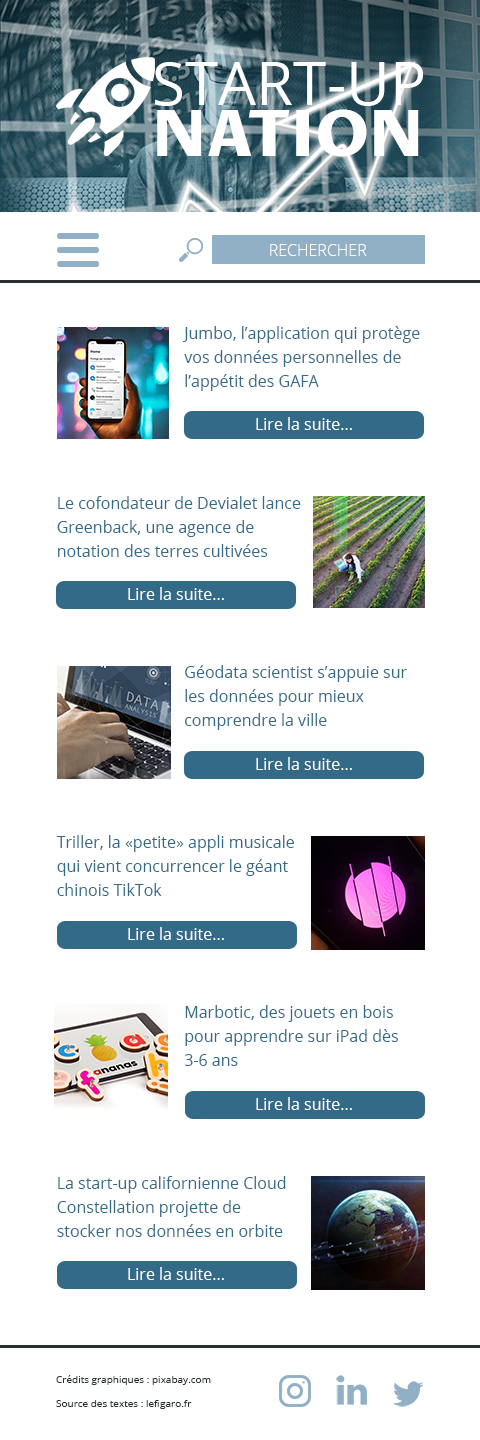
<style>
.page{position:relative;width:480px;height:1440px;background:#ffffff}
.page>*{position:absolute;margin:0}
.t1{font:60px "OpenSans-Regular";color:#ffffff}
.t2{font:64px "ProzaLibre-ExtraBold";color:#ffffff}
.t3{font:16px "OpenSans-Light";color:#ffffff}
.t4{font:16px/24px "OpenSans-Regular";color:#336a88}
.t5{font:16px "OpenSans-Regular";color:#ffffff}
.t6{font:10px/24px "OpenSans-Regular";color:#2a2f32}
</style>
<div class="page">
<p class="t1" style="left:155px;top:62px;width:268px;height:44px">START-UP</p>
<p class="t2" style="left:157px;top:109px;width:262px;height:48px">NATION</p>
<p class="t3" style="left:270px;top:244px;width:97px;height:12px">RECHERCHER</p>
<p class="t4" style="left:182px;top:326px;width:238px;height:65px">Jumbo, l’application qui protège vos données personnelles de l’appétit des GAFA</p>
<p class="t5" style="left:256px;top:417px;width:96px;height:13px">Lire la suite...</p>
<p class="t4" style="left:57px;top:496px;width:244px;height:61px">Le cofondateur de Devialet lance Greenback, une agence de notation des terres cultivées</p>
<p class="t5" style="left:128px;top:587px;width:96px;height:13px">Lire la suite...</p>
<p class="t4" style="left:185px;top:665px;width:222px;height:65px">Géodata scientist s’appuie sur les données pour mieux comprendre la ville</p>
<p class="t5" style="left:256px;top:757px;width:96px;height:13px">Lire la suite...</p>
<p class="t4" style="left:56px;top:835px;width:238px;height:61px">Triller, la «petite» appli musicale qui vient concurrencer le géant chinois TikTok</p>
<p class="t5" style="left:128px;top:927px;width:96px;height:13px">Lire la suite...</p>
<p class="t4" style="left:185px;top:1005px;width:213px;height:61px">Marbotic, des jouets en bois pour apprendre sur iPad dès 3-6 ans</p>
<p class="t5" style="left:256px;top:1097px;width:96px;height:13px">Lire la suite...</p>
<p class="t4" style="left:57px;top:1176px;width:229px;height:61px">La start-up californienne Cloud Constellation projette de stocker nos données en orbite</p>
<p class="t5" style="left:128px;top:1267px;width:96px;height:13px">Lire la suite...</p>
<p class="t6" style="left:56px;top:1375px;width:155px;height:34px">Crédits graphiques : pixabay.com<br>Source des textes : lefigaro.fr</p>
</div>
